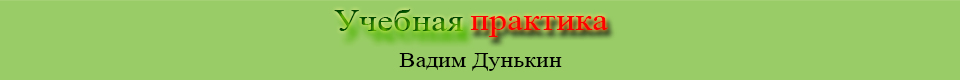
<style>
.page{position:relative;width:960px;height:80px;background:#99cc66}
.page>*{position:absolute;margin:0}
.t1{font:32px "TimesNewRomanPSMT";scale:1.12 1}
.t2{font:32px "TimesNewRomanPSMT";color:#ff0000;scale:1.12 1}
.t3{font:21.3px "TimesNewRomanPSMT";color:#000000;scale:1.12 1}
</style>
<div class="page">
<p class="t1" style="left:334px;top:9px;width:129px;height:22px">Учебная</p>
<p class="t2" style="left:470px;top:16px;width:138px;height:21px">практика</p>
<p class="t3" style="left:399px;top:53px;width:163px;height:18px">Вадим Дунькин</p>
</div>
